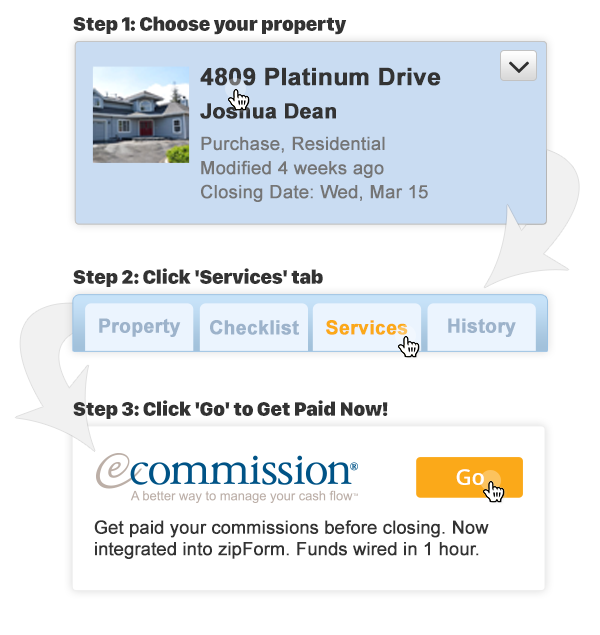
<style>
.page{position:relative;width:600px;height:635px;background:#ffffff}
.page>*{position:absolute;margin:0}
.t1{font:20.4px "SanFranciscoDisplay-Black";letter-spacing:-0.01em;color:#333333}
.t2{font:24.1px "Arial-BoldMT";color:#333333;font-weight:bold}
.t3{font:21.1px "Arial-BoldMT";color:#333333;font-weight:bold}
.t4{font:18.1px/24.1px "ArialMT";color:#757575;font-weight:bold}
.t5{font:19.4px "Arial-BoldMT";color:#9db3cb;font-weight:bold}
.t6{font:19.4px "Arial-BoldMT";color:#fba919;font-weight:bold}
.t7{font:21.1px "OpenSans";color:#ffffff;font-weight:bold}
.t8{font:18.1px "ArialMT";letter-spacing:-0.01em;color:#333333;font-weight:bold}
</style>
<div class="page">
<p class="t1" style="left:73px;top:16px;width:274px;height:19px">Step 1: Choose your property</p>
<p class="t2" style="left:200px;top:67px;width:241px;height:19px">4809 Platinum Drive</p>
<p class="t3" style="left:200px;top:103px;width:136px;height:16px">Joshua Dean</p>
<p class="t4" style="left:201px;top:136px;width:227px;height:66px">Purchase, Residential<br>Modified 4 weeks ago<br>Closing Date: Wed, Mar 15</p>
<p class="t1" style="left:73px;top:268px;width:250px;height:19px">Step 2: Click 'Services' tab</p>
<p class="t5" style="left:99px;top:318px;width:82px;height:19px">Property</p>
<p class="t5" style="left:448px;top:318px;width:68px;height:19px">History</p>
<p class="t5" style="left:210px;top:320px;width:89px;height:15px">Checklist</p>
<p class="t6" style="left:326px;top:320px;width:82px;height:15px">Services</p>
<p class="t1" style="left:73px;top:400px;width:315px;height:19px">Step 3: Click 'Go' to Get Paid Now!</p>
<p class="t7" style="left:456px;top:469px;width:28px;height:16px">Go</p>
<p class="t8" style="left:94px;top:520px;width:395px;height:39px">Get paid your commissions before closing. Now integrated into zipForm. Funds wired in 1 hour.</p>
</div>
